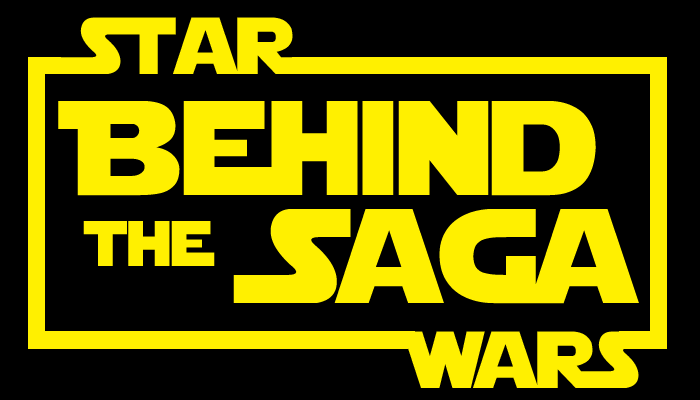
<style>
.page{position:relative;width:700px;height:400px;background:#000000}
.page>*{position:absolute;margin:0}
.t1{font:80px "StarJedi";color:#fff000}
.t2{font:133.3px "StarJedi";color:#fff000}
.t3{font:64px "StarJedi";color:#fff000}
</style>
<div class="page">
<p class="t1" style="left:58px;top:17px;width:240px;height:57px">Star</p>
<p class="t2" style="left:58px;top:101px;width:538px;height:95px">Behind</p>
<p class="t2" style="left:233px;top:209px;width:406px;height:95px">Saga</p>
<p class="t3" style="left:83px;top:221px;width:132px;height:45px">the</p>
<p class="t1" style="left:396px;top:331px;width:247px;height:57px">Wars</p>
</div>
